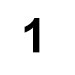
<style>
.page{position:relative;width:75px;height:75px;background:#ffffff}
.page>*{position:absolute;margin:0}
.t1{font:48px "Arial-BoldMT";color:#000000}
</style>
<div class="page">
<p class="t1" style="left:24px;top:18px;width:16px;height:35px">1</p>
</div>
